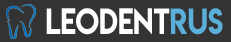
<style>
.page{position:relative;width:231px;height:42px;background:#333333}
.page>*{position:absolute;margin:0}
.t1{font:32.4px "LemonMilkRUSBYLYAJKA";color:#fefefe;scale:0.86 1}
.t2{font:32.4px "LemonMilkRUSBYLYAJKA";color:#5bb0db;scale:0.86 1}
</style>
<div class="page">
<p class="t1" style="left:46px;top:8px;width:177px;height:27px">LEODENT<span class="t2">RUS</span></p>
</div>
